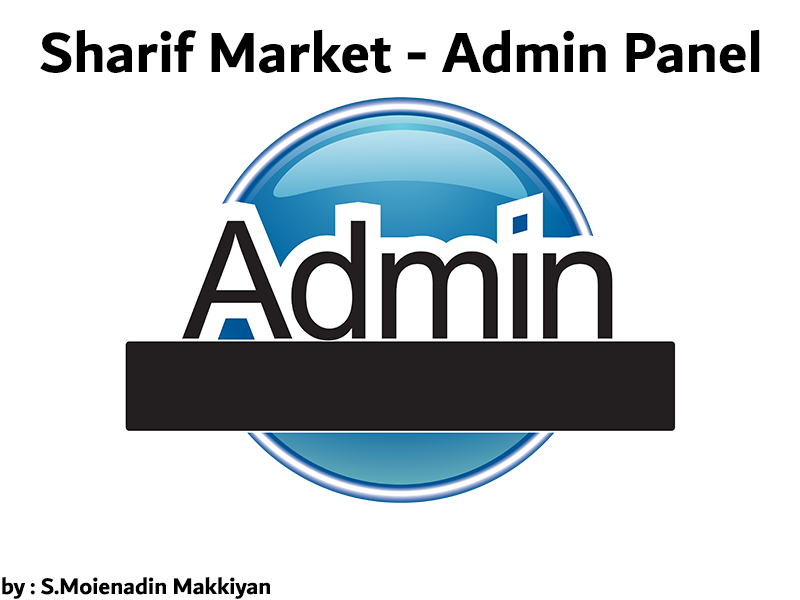
<style>
.page{position:relative;width:800px;height:600px;background:#ffffff}
.page>*{position:absolute;margin:0}
.t1{font:60px "Dubai-Bold";color:#000000}
.t2{font:24px "Dubai-Bold";color:#000000}
</style>
<div class="page">
<p class="t1" style="left:40px;top:29px;width:720px;height:44px">Sharif Market - Admin Panel</p>
<p class="t2" style="left:2px;top:577px;width:268px;height:22px">by : S.Moienadin Makkiyan</p>
</div>
